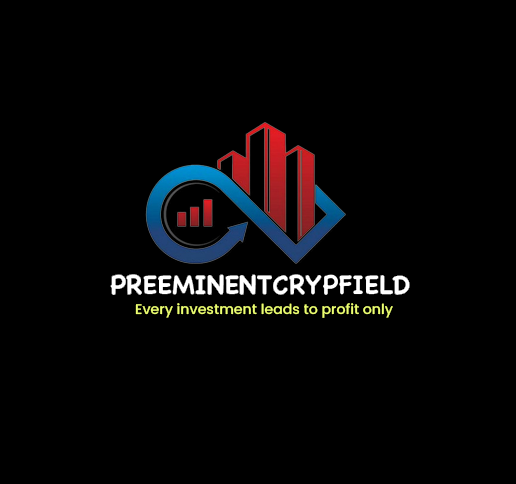
<style>
.page{position:relative;width:516px;height:484px;background:#000000}
.page>*{position:absolute;margin:0}
.t1{font:14px "Poppins-Medium";color:#ecfe71}
</style>
<div class="page">
<p class="t1" style="left:135px;top:303px;width:258px;height:15px">Every investment leads to profit only</p>
</div>
